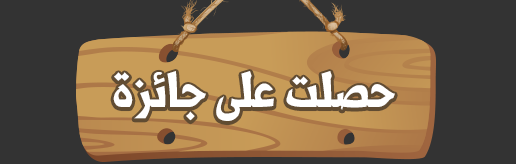
<style>
.page{position:relative;width:516px;height:164px;background:#333333}
.page>*{position:absolute;margin:0}
.t1{font:60px "Shorooq_N1";color:#ffffff}
</style>
<div class="page">
<p class="t1" style="left:113px;top:71px;width:282px;height:50px">حصلت على جائزة</p>
</div>
